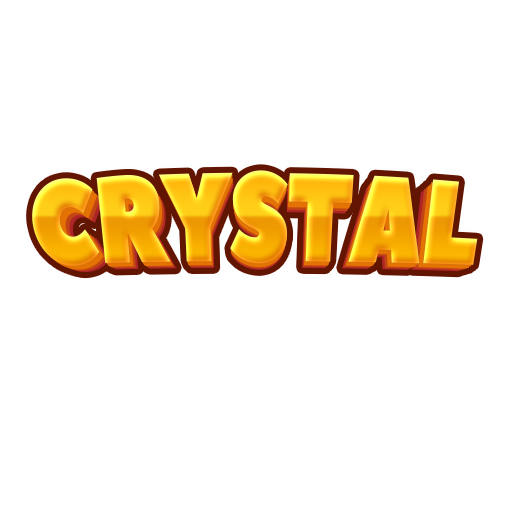
<style>
.page{position:relative;width:512px;height:512px;background:#ffffff}
.page>*{position:absolute;margin:0}
.t1{font:115px "PeaceSans";letter-spacing:-0.025em;scale:0.83 1}
.t2{font:113.9px "PeaceSans";letter-spacing:-0.025em;scale:0.83 1}
.t3{font:112.7px "PeaceSans";letter-spacing:-0.025em;scale:0.83 1}
.t4{font:111.6px "PeaceSans";letter-spacing:-0.025em;scale:0.83 1}
.t5{font:110.5px "PeaceSans";letter-spacing:-0.025em;scale:0.83 1}
.t6{font:109.4px "PeaceSans";letter-spacing:-0.025em;scale:0.83 1}
.t7{font:108.3px "PeaceSans";letter-spacing:-0.025em;scale:0.83 1}
.t8{font:107.2px "PeaceSans";letter-spacing:-0.025em;scale:0.83 1}
</style>
<div class="page">
<p class="t1" style="left:32px;top:170px;width:446px;height:96px">CRYSTAL</p>
<p class="t2" style="left:34px;top:172px;width:441px;height:96px">CRYSTAL</p>
<p class="t3" style="left:36px;top:175px;width:437px;height:94px">CRYSTAL</p>
<p class="t4" style="left:38px;top:177px;width:433px;height:93px">CRYSTAL</p>
<p class="t5" style="left:40px;top:178px;width:429px;height:93px">CRYSTAL</p>
<p class="t6" style="left:43px;top:180px;width:424px;height:91px">CRYSTAL</p>
<p class="t7" style="left:45px;top:181px;width:420px;height:91px">CRYSTAL</p>
<p class="t8" style="left:47px;top:183px;width:416px;height:90px">CRYSTAL</p>
</div>
